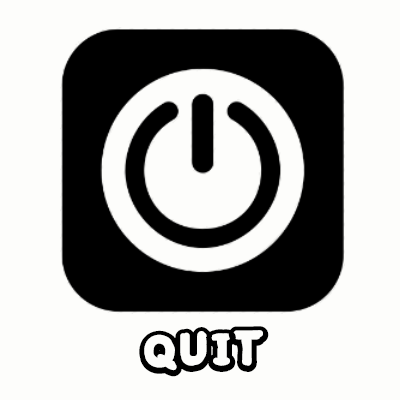
<style>
.page{position:relative;width:400px;height:400px;background:#fdfdfb}
.page>*{position:absolute;margin:0}
.t1{font:71.4px "The-Kids-Mraker-Regular";color:#000000}
</style>
<div class="page">
<p class="t1" style="left:139px;top:326px;width:130px;height:51px">Quit</p>
</div>
